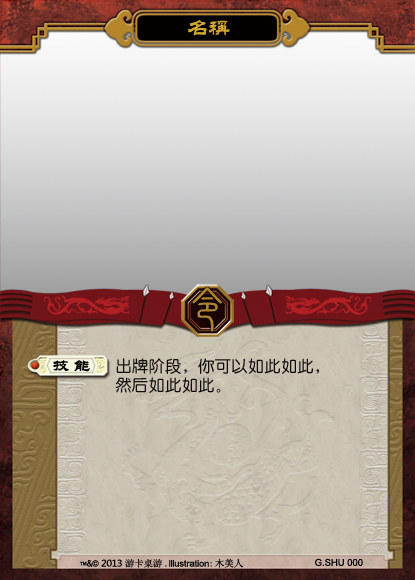
<style>
.page{position:relative;width:415px;height:580px}
.page>*{position:absolute;margin:0}
.t1{font:21.2px "FZL2FW--GB1-0";color:#d1a82d}
.t2{font:44.8px "FZuanSu";color:#b0832e;scale:1.2 1}
.t3{font:15.9px "FZL2FW--GB1-0";letter-spacing:0.26em;color:#040000;font-weight:bold;scale:1.04 1}
.t4{font:16.5px/21.2px "HYe3gj";color:#0f0c0b}
.t5{font:9.4px "SimSun";color:#040000}
.t6{font:9.4px "ArialMT";color:#040000}
.t7{font:9px "ArialMT";color:#040000;scale:1.05 1}
.t8{font:9px "ArialMT";color:#040000;scale:0.91 1}
.t9{font:9px "ArialMT";color:#040000;scale:0.95 1}
.t10{font:8.5px "ArialMT";color:#040000}
.t11{font:9px "MicrosoftYaHei";color:#040000;scale:1.05 1}
.t12{font:9px "SimSun";color:#040000;scale:1.05 1}
</style>
<div class="page">
<p class="t1" style="left:188px;top:20px;width:42px;height:16px">名称</p>
<p class="t2" style="left:192px;top:287px;width:30px;height:45px">令</p>
<p class="t3" style="left:53px;top:360px;width:37px;height:12px">技能</p>
<p class="t4" style="left:115px;top:358px;width:204px;height:35px">出牌阶段，你可以如此如此，<br>然后如此如此。</p>
<p class="t5" style="left:215px;top:558px;width:28px;height:10px">木美人</p>
<p class="t6" style="left:315px;top:558px;width:48px;height:8px">G.SHU 000</p>
<p class="t7" style="left:80px;top:559px;width:132px;height:9px"><span class="t8">™</span><span class="t9">&amp;</span><span class="t10">© </span><span class="t11">2013 </span><span class="t12">游卡桌游 .</span>lllustration<span class="t12">:</span></p>
</div>
